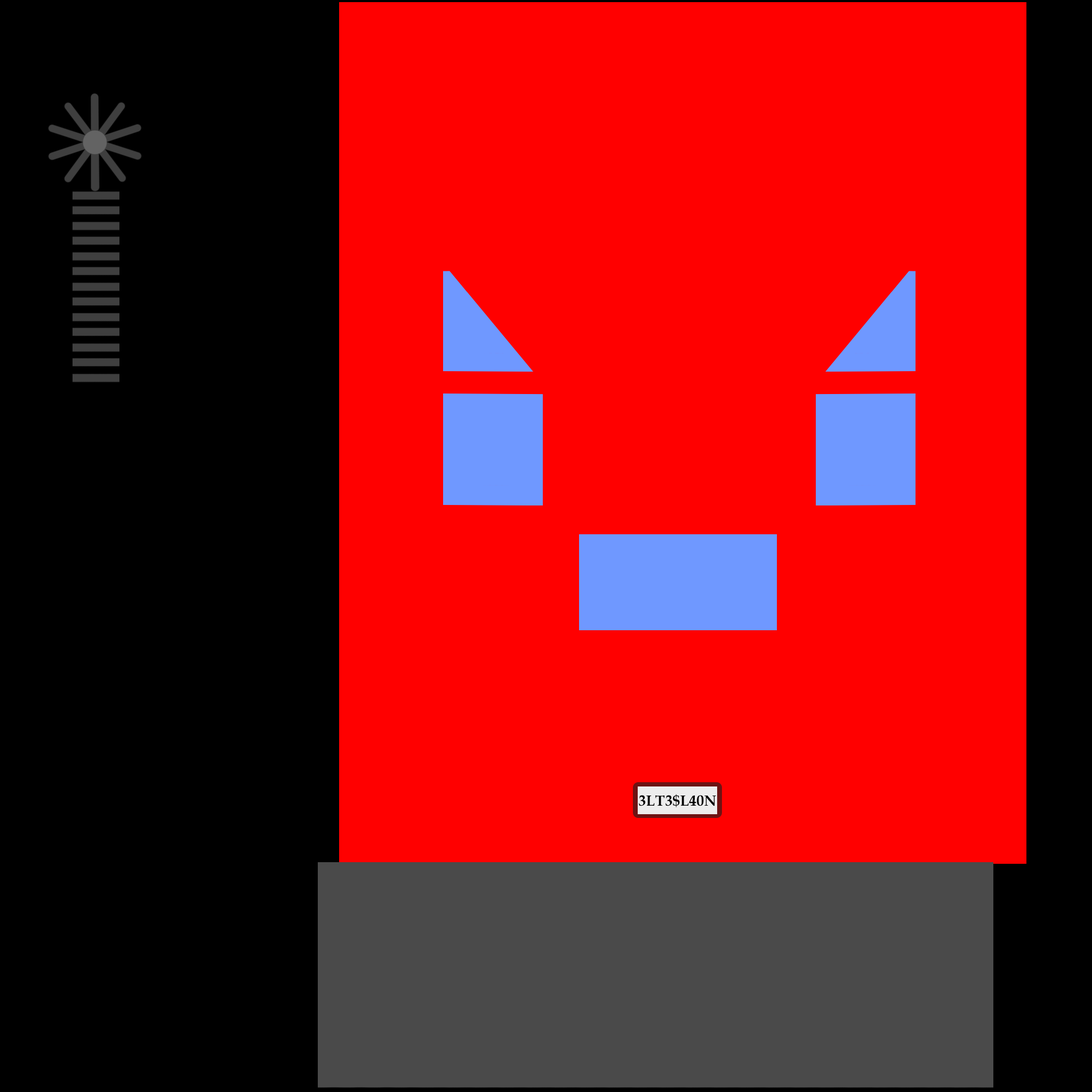
<style>
.page{position:relative;width:1092px;height:1092px;background:#ff0000}
.page>*{position:absolute;margin:0}
.t1{font:14.9px "BookAntiqua-Bold";color:#000000}
</style>
<div class="page">
<p class="t1" style="left:639px;top:794px;width:77px;height:13px">3LT3$L40N</p>
</div>
